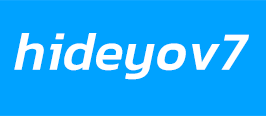
<style>
.page{position:relative;width:266px;height:116px;background:#00a2ff}
.page>*{position:absolute;margin:0}
.t1{font:54.4px "Kanit-MediumItalic";color:#ffffff}
</style>
<div class="page">
<p class="t1" style="left:14px;top:33px;width:235px;height:47px">hideyov7</p>
</div>
